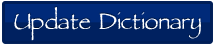
<style>
.page{position:relative;width:215px;height:45px;background:#002160}
.page>*{position:absolute;margin:0}
.t1{font:36px "ParchmentMF";color:#ffffff}
</style>
<div class="page">
<p class="t1" style="left:14px;top:7px;width:187px;height:34px">Update Dictionary</p>
</div>
